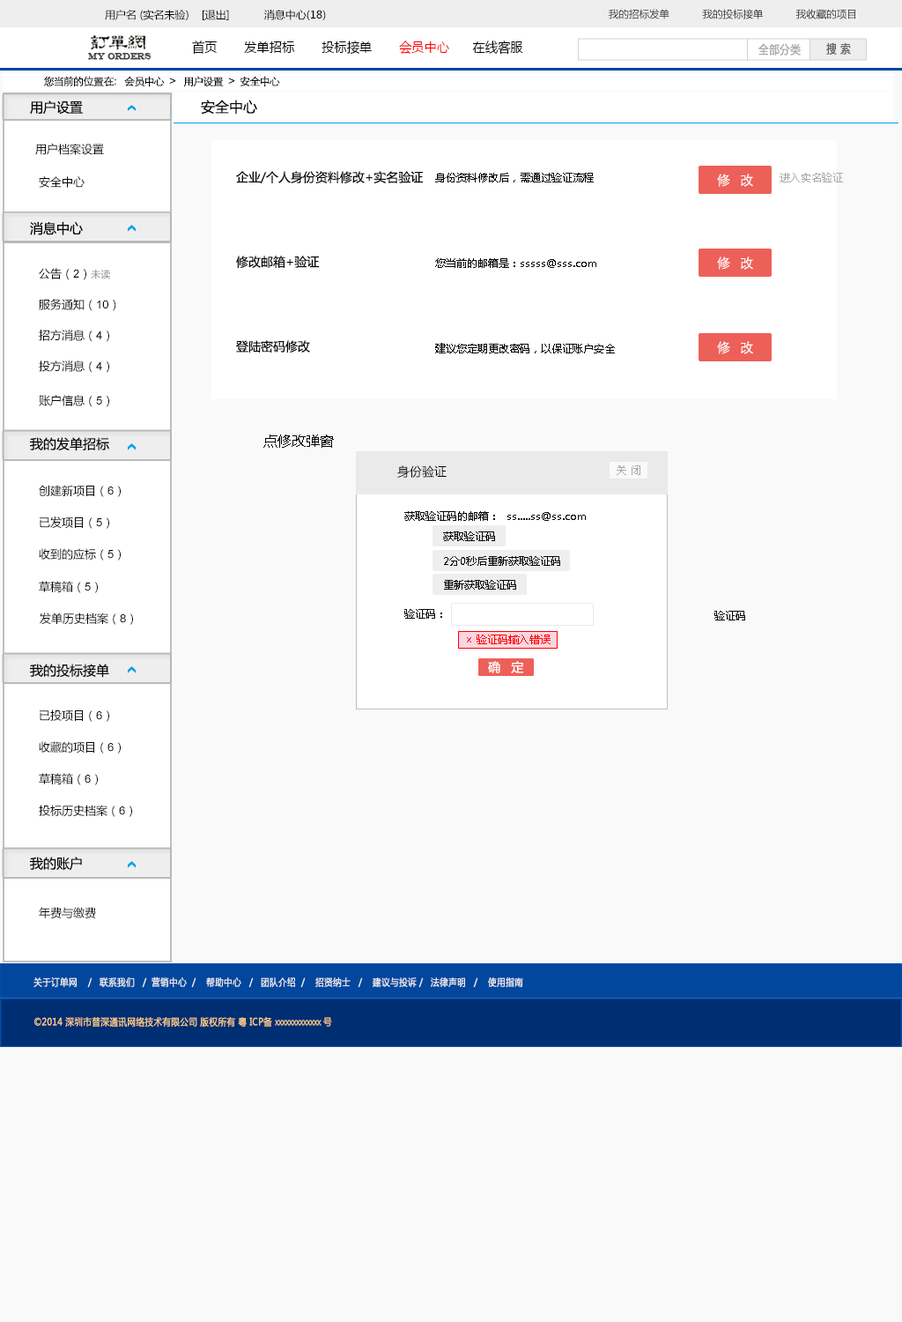
<style>
.page{position:relative;width:902px;height:1322px;background:#f9f9f9}
.page>*{position:absolute;margin:0}
.t1{font:10.6px "MicrosoftYaHei";color:#000000}
.t2{font:10.1px "MicrosoftYaHei";color:#000000}
.t3{font:13.6px "MicrosoftYaHei";color:#000000;font-variant:small-caps;scale:0.94 1}
.t4{font:13.6px "MicrosoftYaHei";color:#ff0000;font-variant:small-caps;scale:0.94 1}
.t5{font:8.7px "EngraversMT";color:#434343;font-variant:small-caps;font-weight:bold;scale:0.86 1}
.t6{font:11.6px "MicrosoftYaHei";color:#aaaaaa;font-variant:small-caps;font-weight:bold;scale:0.86 1}
.t7{font:11.6px "MicrosoftYaHei";color:#626262;font-variant:small-caps;font-weight:bold;scale:0.86 1}
.t8{font:10.6px "STXihei";color:#060606}
.t9{font:13.2px "MicrosoftYaHei";color:#060606}
.t10{font:14.1px "MicrosoftYaHei";color:#060606}
.t11{font:11.5px "MicrosoftYaHei";color:#060606}
.t12{font:12.3px/42.3px "MicrosoftYaHei";color:#060606}
.t13{font:10.6px "MicrosoftYaHei";color:#060606}
.t14{font:13.2px "STXihei";color:#ffffff}
.t15{font:10.6px "MicrosoftYaHei";color:#aaaaaa}
.t16{font:11.5px "ArialMT";color:#060606}
.t17{font:9.7px "MicrosoftYaHei";color:#888584}
.t18{font:12.3px "MicrosoftYaHei";color:#060606}
.t19{font:10.6px "MicrosoftYaHei";color:#ff0000}
.t20{font:12.3px "MicrosoftYaHei";color:#ffffff}
.t21{font:9.7px "MicrosoftYaHei";color:#eeeeee;font-variant:small-caps;font-weight:bold;scale:0.86 1}
.t22{font:13.6px "STXihei";color:#eeeeee;font-variant:small-caps;font-weight:bold;scale:0.86 1}
.t23{font:9.7px "MicrosoftYaHei";color:#facd89;font-variant:small-caps;font-weight:bold;scale:0.87 1}
.t24{font:9.7px "MicrosoftYaHei";color:#eeeeee;font-variant:small-caps;font-weight:bold;scale:0.87 1}
</style>
<div class="page">
<p class="t1" style="left:105px;top:10px;width:221px;height:10px">用户名 (实名未验)    [退出]           消息中心(18)</p>
<p class="t2" style="left:609px;top:9px;width:247px;height:10px">我的招标发单           我的投标接单           我收藏的项目</p>
<p class="t3" style="left:192px;top:41px;width:331px;height:14px">首页       发单招标       投标接单       <span class="t4">会员中心</span>      在线客服</p>
<p class="t5" style="left:88px;top:53px;width:64px;height:7px">MY ORDERS</p>
<p class="t6" style="left:759px;top:43px;width:42px;height:13px">全部分类</p>
<p class="t7" style="left:826px;top:42px;width:25px;height:13px">搜 索</p>
<p class="t8" style="left:43px;top:76px;width:237px;height:11px">您当前的位置在：  会员中心  &gt;   用户设置  &gt;  安全中心</p>
<p class="t9" style="left:30px;top:100px;width:53px;height:15px">用户设置</p>
<p class="t10" style="left:201px;top:100px;width:56px;height:15px">安全中心</p>
<p class="t11" style="left:35px;top:143px;width:69px;height:12px">用户档案设置</p>
<p class="t12" style="left:236px;top:171px;width:188px;height:181px">企业/个人身份资料修改+实名验证     <br><br>修改邮箱+验证<br><br>登陆密码修改</p>
<p class="t13" style="left:435px;top:173px;width:159px;height:9px">身份资料修改后，需通过验证流程</p>
<p class="t14" style="left:717px;top:174px;width:36px;height:13px">修   改</p>
<p class="t15" style="left:780px;top:173px;width:63px;height:9px">进入实名验证</p>
<p class="t11" style="left:39px;top:176px;width:46px;height:12px">安全中心</p>
<p class="t9" style="left:30px;top:221px;width:53px;height:14px">消息中心</p>
<p class="t14" style="left:717px;top:256px;width:36px;height:14px">修   改</p>
<p class="t11" style="left:39px;top:268px;width:71px;height:12px">公告（<span class="t16">2</span>）<span class="t17">未读</span></p>
<p class="t13" style="left:435px;top:258px;width:161px;height:10px">您当前的邮箱是：sssss@sss.com</p>
<p class="t11" style="left:39px;top:299px;width:77px;height:12px">服务通知（<span class="t16">10</span>）</p>
<p class="t11" style="left:39px;top:330px;width:70px;height:12px">招方消息（<span class="t16">4</span>）</p>
<p class="t14" style="left:717px;top:341px;width:36px;height:13px">修   改</p>
<p class="t13" style="left:435px;top:343px;width:180px;height:10px">建议您定期更改密码，以保证账户安全</p>
<p class="t11" style="left:39px;top:360px;width:70px;height:13px">投方消息（<span class="t16">4</span>）</p>
<p class="t11" style="left:39px;top:395px;width:70px;height:12px">账户信息（<span class="t16">5</span>）</p>
<p class="t9" style="left:30px;top:437px;width:79px;height:14px">我的发单招标</p>
<p class="t10" style="left:263px;top:434px;width:71px;height:14px">点修改弹窗</p>
<p class="t18" style="left:397px;top:465px;width:50px;height:13px">身份验证</p>
<p class="t15" style="left:617px;top:465px;width:24px;height:10px">关 闭</p>
<p class="t11" style="left:39px;top:485px;width:82px;height:12px">创建新项目（<span class="t16">6</span>）</p>
<p class="t11" style="left:40px;top:516px;width:69px;height:13px">已发项目（<span class="t16">5</span>）</p>
<p class="t13" style="left:404px;top:511px;width:182px;height:10px">获取验证码的邮箱：  ss.....ss@ss.com</p>
<p class="t13" style="left:443px;top:531px;width:52px;height:10px">获取验证码</p>
<p class="t11" style="left:39px;top:548px;width:82px;height:12px">收到的应标（<span class="t16">5</span>）</p>
<p class="t13" style="left:444px;top:556px;width:116px;height:10px">2分0秒后重新获取验证码</p>
<p class="t11" style="left:39px;top:581px;width:59px;height:12px">草稿箱（<span class="t16">5</span>）</p>
<p class="t13" style="left:444px;top:580px;width:72px;height:9px">重新获取验证码</p>
<p class="t11" style="left:40px;top:612px;width:93px;height:13px">发单历史档案（<span class="t16">8</span>）</p>
<p class="t13" style="left:404px;top:609px;width:38px;height:10px">验证码：</p>
<p class="t13" style="left:715px;top:611px;width:30px;height:9px">验证码</p>
<p class="t19" style="left:467px;top:634px;width:84px;height:10px">× 验证码输入错误</p>
<p class="t9" style="left:30px;top:663px;width:79px;height:15px">我的投标接单</p>
<p class="t20" style="left:488px;top:661px;width:36px;height:12px">确   定</p>
<p class="t11" style="left:40px;top:709px;width:69px;height:13px">已投项目（<span class="t16">6</span>）</p>
<p class="t11" style="left:39px;top:741px;width:82px;height:12px">收藏的项目（<span class="t16">6</span>）</p>
<p class="t11" style="left:39px;top:773px;width:59px;height:12px">草稿箱（<span class="t16">6</span>）</p>
<p class="t11" style="left:39px;top:804px;width:93px;height:13px">投标历史档案（<span class="t16">6</span>）</p>
<p class="t9" style="left:30px;top:856px;width:52px;height:15px">我的账户</p>
<p class="t11" style="left:39px;top:907px;width:57px;height:11px">年费与缴费</p>
<p class="t21" style="left:33px;top:976px;width:490px;height:11px"><span class="t22"><br><br></span>关于订单网    /   联系我们   /  营销中心  /    帮助中心   /   团队介绍  /    招贤纳士   /    建议与投诉 /   法律声明   /    使用指南</p>
<p class="t23" style="left:34px;top:1017px;width:298px;height:9px"><span class="t24"> </span>©2014 深圳市普深通讯网络技术有限公司 版权所有 粤 ICP备 xxxxxxxxxxxxx 号</p>
</div>
